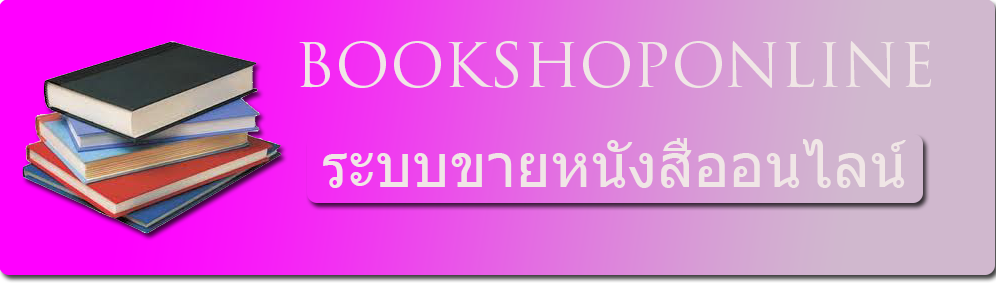
<style>
.page{position:relative;width:996px;height:300px}
.page>*{position:absolute;margin:0}
.t1{font:60px "TrajanPro-Regular";color:#f0e6e6}
.t2{font:60px "Tahoma";color:#f0e6e6}
</style>
<div class="page">
<p class="t1" style="left:299px;top:41px;width:632px;height:47px">BOOKSHOPONLINE</p>
<p class="t2" style="left:323px;top:138px;width:583px;height:50px">ระบบขายหนังสืออนไลน์</p>
</div>
